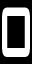
<style>
.page{position:relative;width:32px;height:64px;background:#000000}
.page>*{position:absolute;margin:0}
.t1{font:96px "BankGothicBT-Medium";color:#ffffff;scale:0.5 1}
</style>
<div class="page">
<p class="t1" style="left:2px;top:7px;width:28px;height:50px">0</p>
</div>
